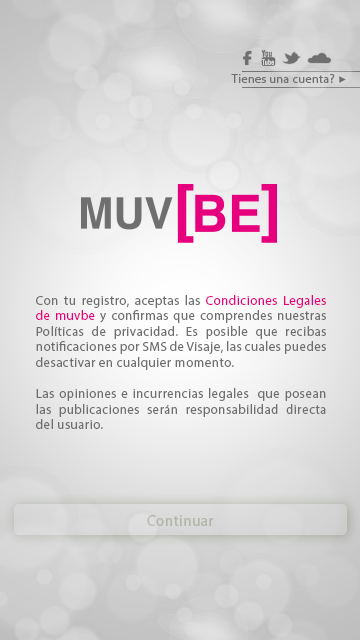
<style>
.page{position:relative;width:360px;height:640px}
.page>*{position:absolute;margin:0}
.t1{font:12px "MyriadPro-Regular";letter-spacing:0.035em;color:#706f6f}
.t2{font:13px "MyriadPro-Regular";letter-spacing:0.035em;color:#706f6f}
.t3{font:13px "MyriadPro-Regular";letter-spacing:0.035em;color:#e6007e}
</style>
<div class="page">
<p class="t1" style="left:231px;top:74px;width:104px;height:9px">Tienes una cuenta?</p>
<p class="t2" style="left:36px;top:295px;width:290px;height:134px;text-align:justify">Con tu registro, aceptas las <span class="t3">Condiciones Legales de muvbe </span>y confirmas que comprendes nuestras Políticas de privacidad. Es posible que recibas notificaciones por SMS de Visaje, las cuales puedes desactivar en cualquier momento.<br><br>Las opiniones e incurrencias legales  que posean las publicaciones serán responsabilidad directa del usuario.</p>
</div>
